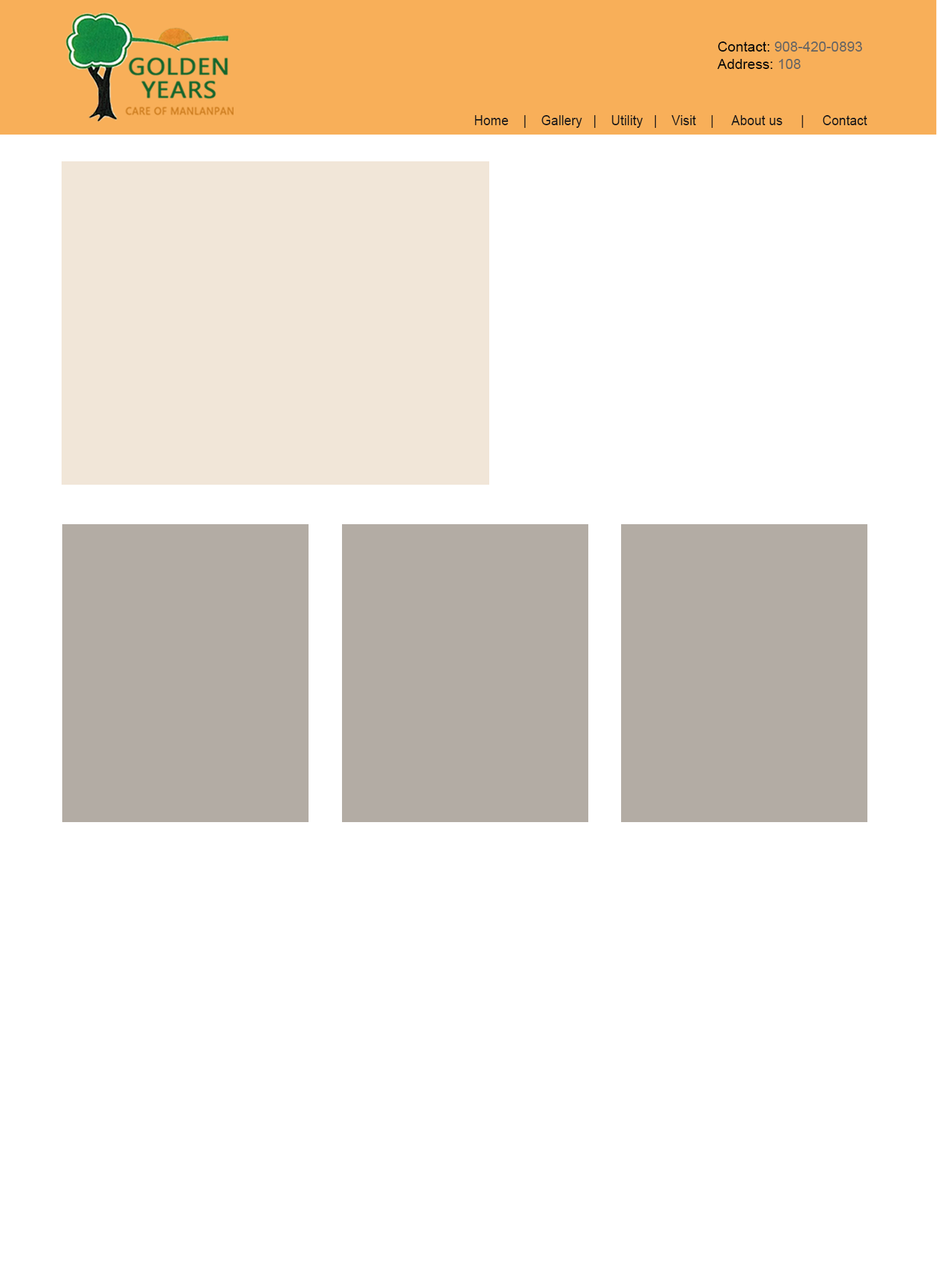
<style>
.page{position:relative;width:937px;height:1272px;background:#ffffff}
.page>*{position:absolute;margin:0}
.t1{font:14.2px "ArialMT";color:#666563}
.t2{font:14.2px "ArialMT";color:#0a0a0a}
.t3{font:13.4px "ArialMT";color:#1d1b1b}
.t4{font:13.4px "ArialMT";color:#f9f9f9}
</style>
<div class="page">
<p class="t1" style="left:718px;top:42px;width:145px;height:27px"><span class="t2">Contact: </span>908-420-0893<br><span class="t2">Address: </span>108</p>
<p class="t3" style="left:475px;top:115px;width:393px;height:13px"><span class="t4"> </span>Home    |    Gallery   |    Utility   |    Visit    |     About us     |     Contact</p>
</div>
